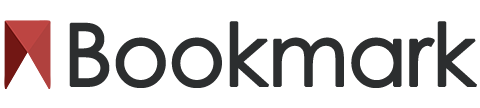
<style>
.page{position:relative;width:480px;height:108px;background:#ffffff}
.page>*{position:absolute;margin:0}
.t1{font:85.8px "CenturyGothic";letter-spacing:-0.01em;color:#2c2e2f;font-weight:bold}
</style>
<div class="page">
<p class="t1" style="left:69px;top:21px;width:408px;height:67px">Bookmark</p>
</div>
